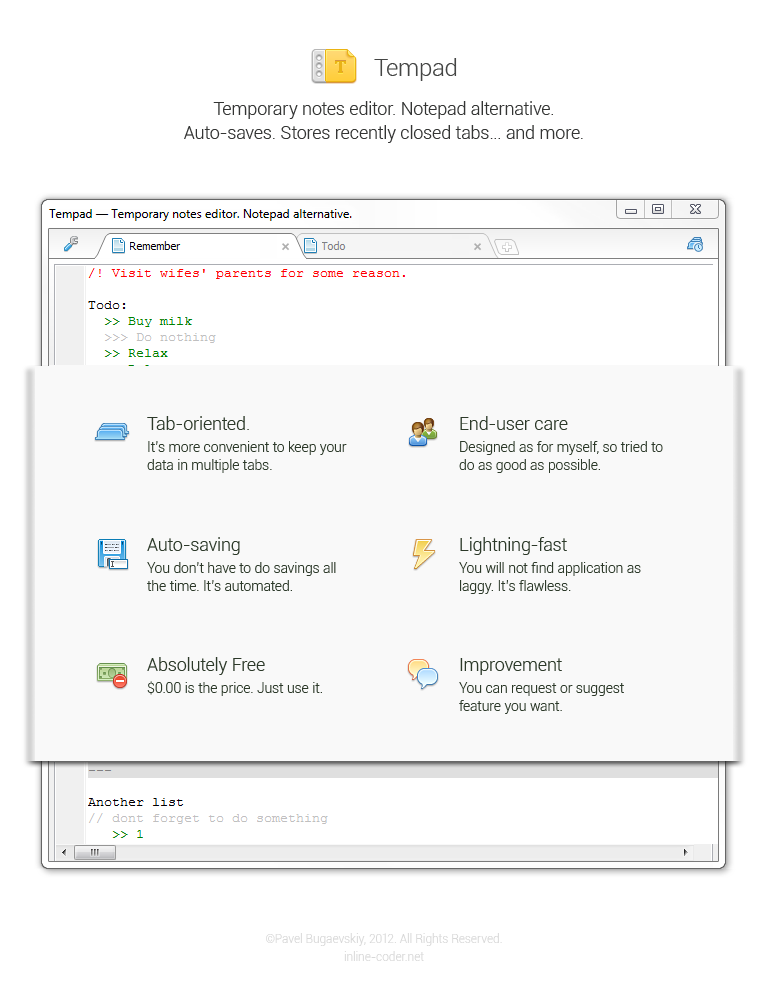
<style>
.page{position:relative;width:768px;height:1000px;background:#ffffff}
.page>*{position:absolute;margin:0}
.t1{font:24px "Roboto-Light";color:#444544}
.t2{font:18px/24px "Roboto-Light";color:#343534}
.t3{font:14px/22px "Roboto-Light";color:#2c3929}
.t4{font:18px/24px "Roboto-Light";color:#2c3929}
.t5{font:14px/18px "Roboto-Light";color:#2c3929}
.t6{font:12px/18px "Roboto-Light";color:#d8d8d8}
</style>
<div class="page">
<p class="t1" style="left:374px;top:58px;width:83px;height:23px">Tempad</p>
<p class="t2" style="left:184px;top:101px;width:399px;height:42px;text-align:center">Temporary notes editor. Notepad alternative.<br>Auto-saves. Stores recently closed tabs... and more.</p>
<p class="t3" style="left:147px;top:416px;width:200px;height:57px"><span class="t4">Tab-oriented.<br></span>It’s more convenient to keep your <br><span class="t5">data in multiple tabs.</span></p>
<p class="t3" style="left:459px;top:416px;width:204px;height:57px"><span class="t4">End-user care<br></span>Designed as for myself, so tried to<br><span class="t5">do as good as possible.</span></p>
<p class="t3" style="left:147px;top:537px;width:189px;height:54px"><span class="t4">Auto-saving<br></span>You don’t have to do savings all<br><span class="t5">the time. It’s automated.</span></p>
<p class="t3" style="left:459px;top:537px;width:182px;height:57px"><span class="t4">Lightning-fast<br></span>You will not find application <span class="t5">as <br>laggy. It’s flawless.</span></p>
<p class="t3" style="left:147px;top:657px;width:175px;height:39px"><span class="t4">Absolutely Free<br></span>$0.00 is the price. Just use it.</p>
<p class="t3" style="left:459px;top:658px;width:165px;height:56px"><span class="t4">Improvement<br></span>You can request or suggest <br><span class="t5">feature you want.</span></p>
<p class="t6" style="left:266px;top:933px;width:236px;height:28px;text-align:center">©Pavel Bugaevskiy, 2012. All Rights Reserved.<br>inline-coder.net</p>
</div>
